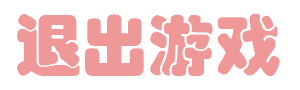
<style>
.page{position:relative;width:300px;height:90px;background:#ffffff}
.page>*{position:absolute;margin:0}
.t1{font:66.7px "STHupo";color:#ef9898}
</style>
<div class="page">
<p class="t1" style="left:17px;top:13px;width:263px;height:64px">退出游戏</p>
</div>
